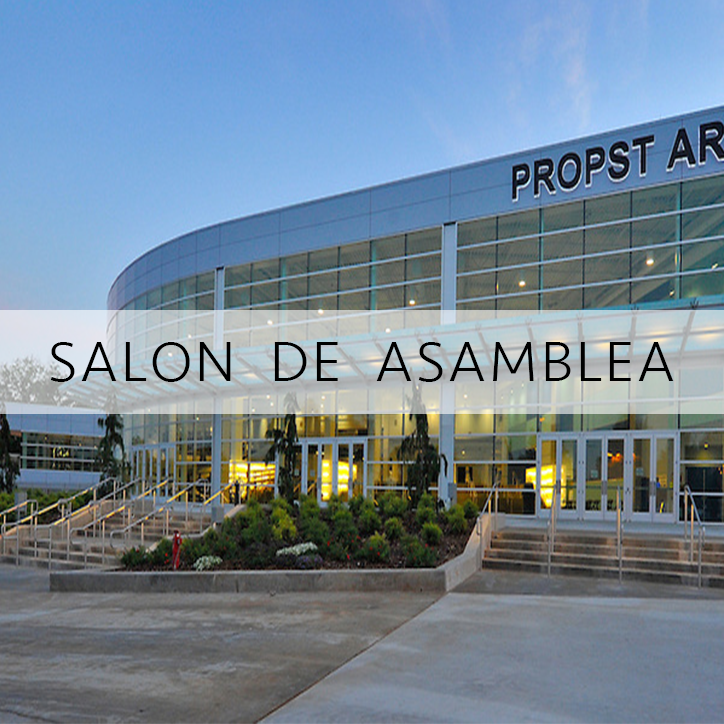
<style>
.page{position:relative;width:724px;height:724px}
.page>*{position:absolute;margin:0}
.t1{font:58.3px "Seravek-Light";letter-spacing:0.05em;color:#000000}
</style>
<div class="page">
<p class="t1" style="left:50px;top:342px;width:624px;height:40px">SALON  DE  ASAMBLEA</p>
</div>
